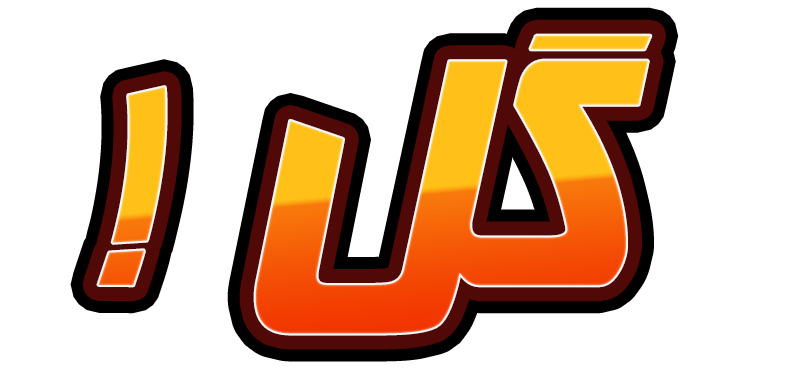
<style>
.page{position:relative;width:797px;height:369px;background:#ffffff}
.page>*{position:absolute;margin:0}
.t1{font:390px "BFarnaz"}
</style>
<div class="page">
<p class="t1" style="left:98px;top:35px;width:553px;height:299px">! گل</p>
</div>
